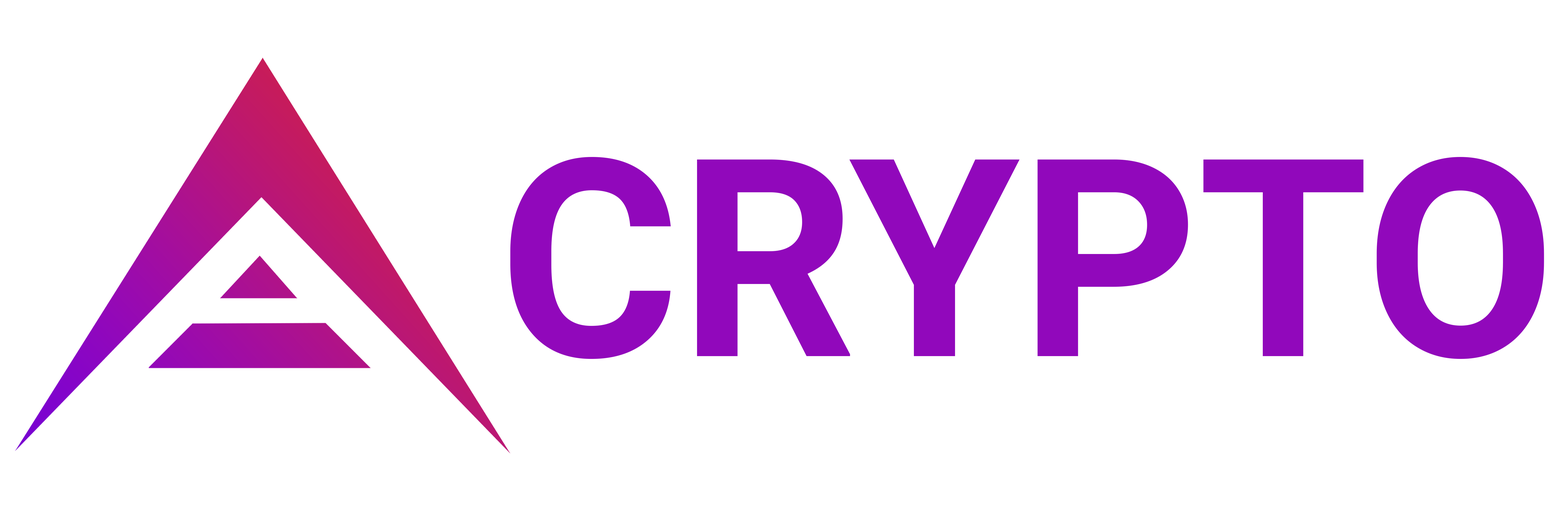
<style>
.page{position:relative;width:1568px;height:508px;background:#ffffff}
.page>*{position:absolute;margin:0}
.t1{font:276.2px "Roboto-Bold";color:#9108bb}
</style>
<div class="page">
<p class="t1" style="left:510px;top:157px;width:1034px;height:202px">CRYPTO</p>
</div>
